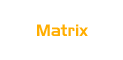
<style>
.page{position:relative;width:123px;height:60px;background:#ffffff}
.page>*{position:absolute;margin:0}
.t1{font:16px "AeroRegularSWFTE";color:#ffad00}
</style>
<div class="page">
<p class="t1" style="left:37px;top:24px;width:51px;height:12px">Matrix</p>
</div>
